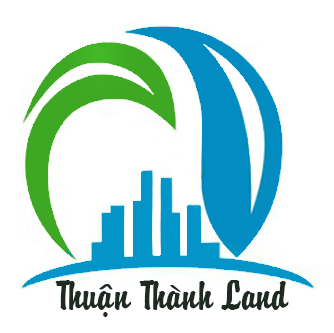
<style>
.page{position:relative;width:334px;height:333px;background:#ffffff}
.page>*{position:absolute;margin:0}
.t1{font:36px "VNI-BriquetNormal";color:#1f2b22}
</style>
<div class="page">
<p class="t1" style="left:55px;top:280px;width:234px;height:37px">Thuaän Thaønh Land</p>
</div>
